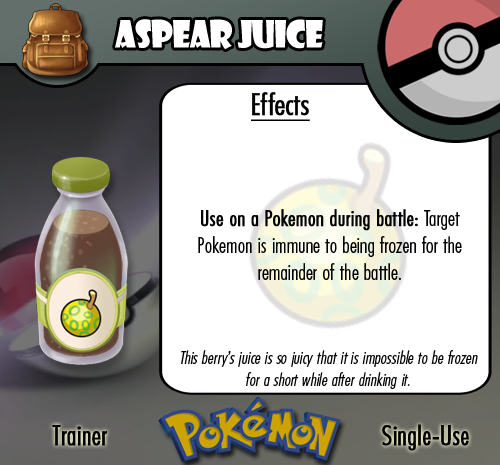
<style>
.page{position:relative;width:500px;height:465px;background:#ffffff}
.page>*{position:absolute;margin:0}
.t1{font:36.7px "ShowcardGothic-Reg";letter-spacing:-0.025em;color:#ffffff;scale:0.91 1}
.t2{font:22.2px "FuturaCondensedBQ-Light";color:#010101}
.t3{font:27.8px "FuturaCondensedBQ-Light";color:#010101;font-weight:bold}
.t4{font:30.6px "FuturaCondensedBQ-Light";color:#010101;font-weight:bold;text-decoration:underline}
.t5{font:22.2px "FuturaCondensedBQ-Light";color:#010101;font-weight:bold}
.t6{font:18.1px "FuturaCondensedBQ-Light";color:#010101;font-style:italic}
</style>
<div class="page">
<p class="t1" style="left:115px;top:19px;width:208px;height:31px">Aspear Juice</p>
<p class="t2" style="left:198px;top:92px;width:264px;height:188px"><span class="t3">  </span><span class="t4">Effects<br><br><br><br><br><br></span><span class="t5">Use on a Pokemon during battle: </span>Target Pokemon is immune to being frozen for the remainder of the battle.</p>
<p class="t6" style="left:181px;top:350px;width:297px;height:39px;text-align:center">This berry’s juice is so juicy that it is impossible to be frozen for a short while after drinking it.</p>
<p class="t3" style="left:52px;top:425px;width:55px;height:21px">Trainer</p>
<p class="t3" style="left:382px;top:424px;width:87px;height:27px">Single-Use</p>
</div>
